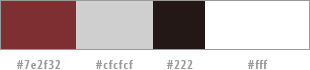
<style>
.page{position:relative;width:310px;height:70px;background:#ffffff}
.page>*{position:absolute;margin:0}
.t1{font:11.7px "OpenSansCondensed-Bold";letter-spacing:0.1em;color:#999999}
</style>
<div class="page">
<p class="t1" style="left:16px;top:60px;width:45px;height:9px">#7e2f32</p>
<p class="t1" style="left:95px;top:60px;width:38px;height:9px">#cfcfcf</p>
<p class="t1" style="left:166px;top:60px;width:27px;height:9px">#222</p>
<p class="t1" style="left:247px;top:60px;width:21px;height:9px">#fff</p>
</div>
